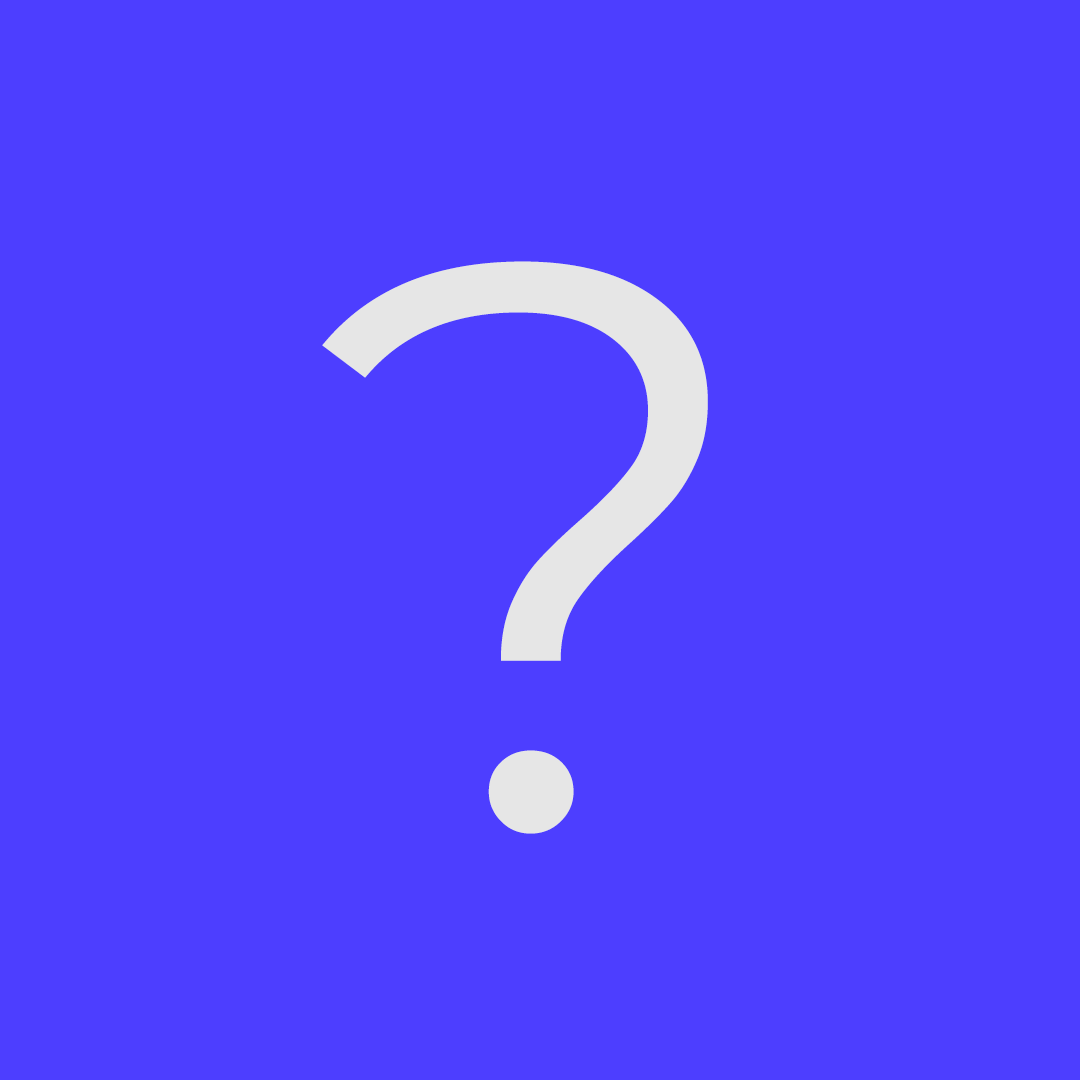
<style>
.page{position:relative;width:1080px;height:1080px;background:#4d3eff}
.page>*{position:absolute;margin:0}
.t1{font:804.2px "Montserrat-Regular";color:#e6e6e6}
</style>
<div class="page">
<p class="t1" style="left:322px;top:261px;width:386px;height:573px">?</p>
</div>
